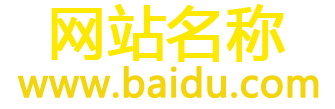
<style>
.page{position:relative;width:335px;height:109px;background:#ffffff}
.page>*{position:absolute;margin:0}
.t1{font:58px "MicrosoftYaHei";color:#fde800;font-weight:bold}
.t2{font:38px "MicrosoftYaHei";color:#f3d50d;font-weight:bold}
</style>
<div class="page">
<p class="t1" style="left:51px;top:4px;width:234px;height:58px">网站名称</p>
<p class="t2" style="left:17px;top:66px;width:302px;height:32px">www.baidu.com</p>
</div>
